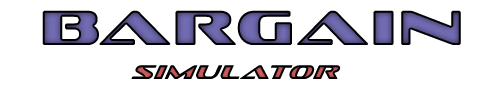
<style>
.page{position:relative;width:500px;height:100px;background:#ffffff}
.page>*{position:absolute;margin:0}
.t1{font:50px "SofachromeRg-Regular";letter-spacing:0.05em}
.t2{font:20px "SofachromeRg-Italic";letter-spacing:0.05em}
</style>
<div class="page">
<p class="t1" style="left:42px;top:10px;width:419px;height:35px">BARGAIN</p>
<p class="t2" style="left:131px;top:65px;width:210px;height:14px">SIMULATOR</p>
</div>
